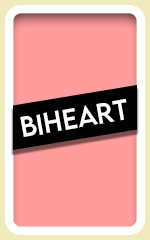
<style>
.page{position:relative;width:150px;height:240px;background:#ff9c9c}
.page>*{position:absolute;margin:0}
.t1{font:25.3px "LEMONMILK-Regular";color:#ffffff;font-weight:bold}
</style>
<div class="page">
<p class="t1" style="left:20px;top:99px;width:107px;height:38px;rotate:-10deg">BiHeart</p>
</div>
